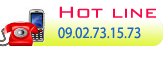
<style>
.page{position:relative;width:165px;height:57px;background:#ffffff}
.page>*{position:absolute;margin:0}
.t1{font:20.8px "BankGothicBT-Light";color:#f60a47;scale:1.07 1}
.t2{font:16px "MyriadPro-Regular";color:#2062d0;scale:0.87 1}
</style>
<div class="page">
<p class="t1" style="left:59px;top:6px;width:97px;height:12px">Hot line</p>
<p class="t2" style="left:58px;top:27px;width:83px;height:12px">09.02.73.15.73</p>
</div>
